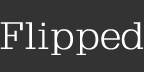
<style>
.page{position:relative;width:144px;height:72px;background:#333333}
.page>*{position:absolute;margin:0}
.t1{font:39.4px "FZBYFKSK--GBK1-0";color:#ffffff}
</style>
<div class="page">
<p class="t1" style="left:0px;top:22px;width:143px;height:33px">Flipped</p>
</div>
